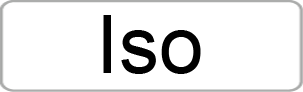
<style>
.page{position:relative;width:303px;height:92px;background:#ffffff}
.page>*{position:absolute;margin:0}
.t1{font:80px "ArialMT";color:#000000}
</style>
<div class="page">
<p class="t1" style="left:103px;top:15px;width:98px;height:59px">Iso</p>
</div>
